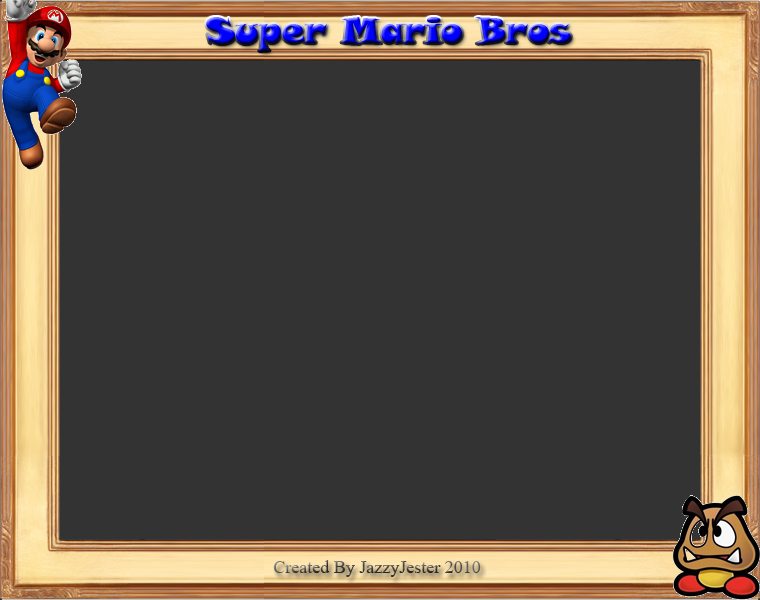
<style>
.page{position:relative;width:760px;height:600px;background:#333333}
.page>*{position:absolute;margin:0}
.t1{font:36px "SnapITC-Regular"}
.t2{font:18px "TimesNewRomanPSMT"}
</style>
<div class="page">
<p class="t1" style="left:206px;top:17px;width:365px;height:34px">Super Mario Bros</p>
<p class="t2" style="left:273px;top:560px;width:208px;height:17px">Created By JazzyJester 2010</p>
</div>
